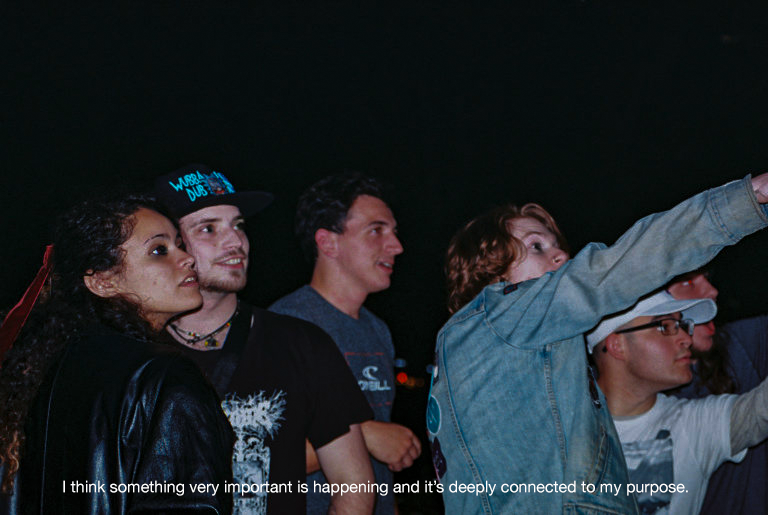
<style>
.page{position:relative;width:768px;height:515px}
.page>*{position:absolute;margin:0}
.t1{font:16px "HelveticaNeue";color:#ffffff}
</style>
<div class="page">
<p class="t1" style="left:63px;top:480px;width:625px;height:16px">I think something very important is happening and it’s deeply connected to my purpose.</p>
</div>
